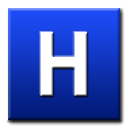
<style>
.page{position:relative;width:128px;height:128px;background:#ffffff}
.page>*{position:absolute;margin:0}
.t1{font:101px "Consolas-Bold";color:#ffffff}
</style>
<div class="page">
<p class="t1" style="left:40px;top:32px;width:47px;height:64px">H</p>
</div>
